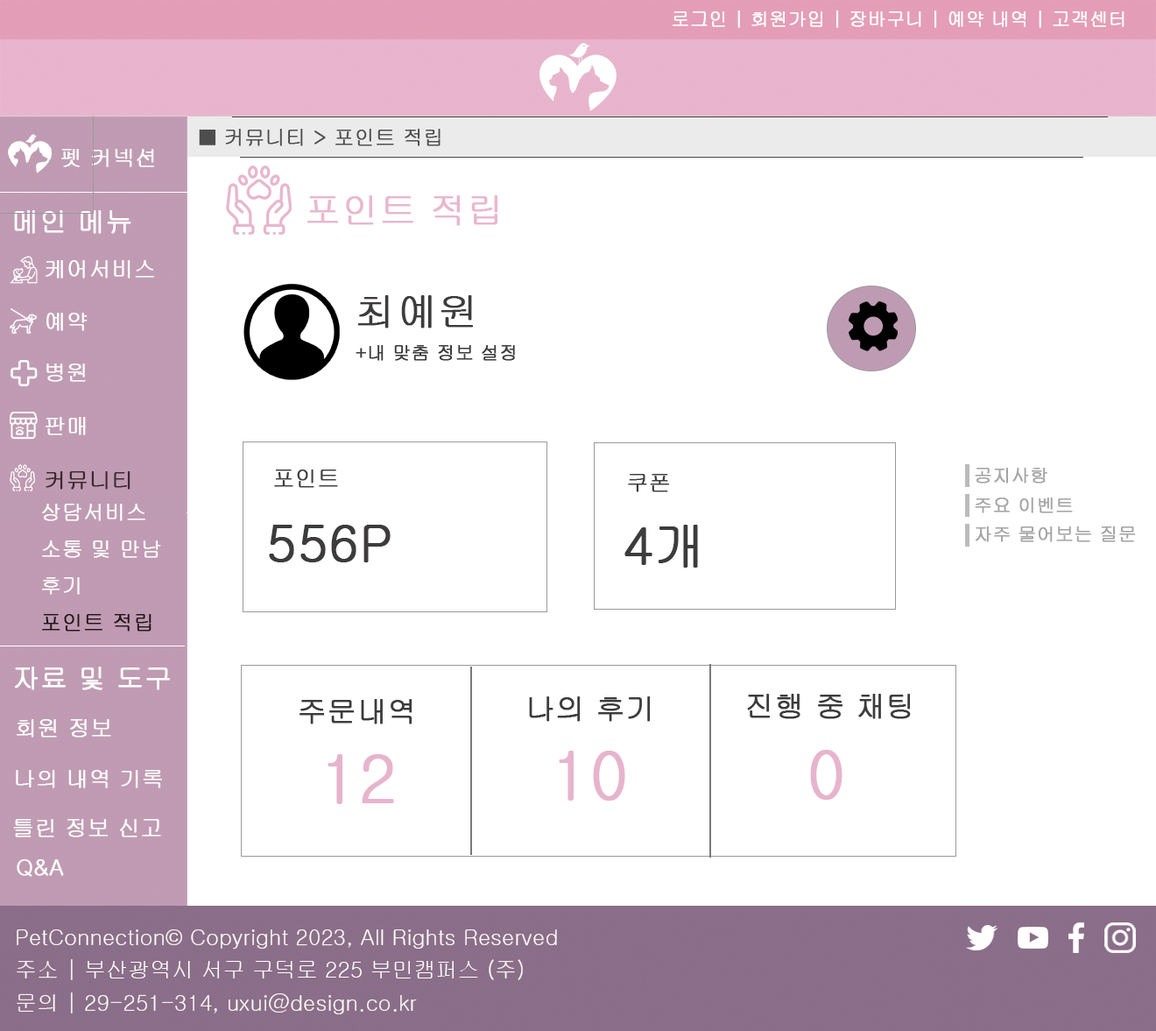
<style>
.page{position:relative;width:1156px;height:1031px;background:#ffffff}
.page>*{position:absolute;margin:0}
.t1{font:18.4px "Gulim";color:#ffffff;font-weight:bold}
.t2{font:20.1px "Gulim";color:#4d4d4d;font-weight:bold}
.t3{font:21.9px "Gulim";color:#ffffff;font-weight:bold}
.t4{font:36.5px "Gulim";color:#e9b7ce;font-weight:bold}
.t5{font:27.4px "Gulim";color:#ffffff;font-weight:bold}
.t6{font:40.2px "Gulim";color:#3d3b3b;font-weight:bold}
.t7{font:18.3px "Gulim";color:#3d3b3b;font-weight:bold}
.t8{font:21.9px "Gulim";color:#392a2e;font-weight:bold}
.t9{font:21.9px "Gulim";color:#3d3b3b;font-weight:bold}
.t10{font:18.3px "Gulim";color:#a5a5a5;font-weight:bold}
.t11{font:51.1px "Gulim";color:#3d3b3b;font-weight:bold}
.t12{font:29.2px "Gulim";color:#3d3b3b;font-weight:bold}
.t13{font:65.7px "Gulim";color:#e7b4cd;font-weight:bold}
.t14{font:21.9px/32.9px "Gulim";color:#ffffff}
</style>
<div class="page">
<p class="t1" style="left:673px;top:11px;width:452px;height:17px">로그인 | 회원가입 | 장바구니 | 예약 내역 | 고객센터</p>
<p class="t2" style="left:199px;top:129px;width:242px;height:17px">■ 커뮤니티 &gt; 포인트 적립</p>
<p class="t3" style="left:61px;top:149px;width:93px;height:18px">펫 커넥션</p>
<p class="t4" style="left:307px;top:195px;width:191px;height:31px">포인트 적립</p>
<p class="t5" style="left:14px;top:210px;width:117px;height:24px">메인 메뉴</p>
<p class="t3" style="left:46px;top:260px;width:108px;height:19px">케어서비스</p>
<p class="t6" style="left:357px;top:295px;width:116px;height:34px">최예원</p>
<p class="t3" style="left:46px;top:313px;width:42px;height:18px">예약</p>
<p class="t7" style="left:356px;top:345px;width:159px;height:16px">+내 맞춤 정보 설정</p>
<p class="t3" style="left:46px;top:364px;width:40px;height:18px">병원</p>
<p class="t3" style="left:46px;top:417px;width:40px;height:18px">판매</p>
<p class="t8" style="left:46px;top:471px;width:85px;height:19px">커뮤니티</p>
<p class="t9" style="left:274px;top:470px;width:64px;height:18px">포인트</p>
<p class="t9" style="left:628px;top:474px;width:41px;height:18px">쿠폰</p>
<p class="t10" style="left:975px;top:468px;width:73px;height:16px">공지사항</p>
<p class="t10" style="left:975px;top:498px;width:98px;height:15px">주요 이벤트</p>
<p class="t11" style="left:269px;top:525px;width:122px;height:37px">556P</p>
<p class="t11" style="left:625px;top:525px;width:73px;height:43px">4개</p>
<p class="t10" style="left:976px;top:527px;width:160px;height:15px">자주 물어보는 질문</p>
<p class="t5" style="left:15px;top:667px;width:155px;height:23px">자료 및 도구</p>
<p class="t12" style="left:300px;top:699px;width:113px;height:26px">주문내역</p>
<p class="t12" style="left:529px;top:696px;width:122px;height:26px">나의 후기</p>
<p class="t12" style="left:747px;top:694px;width:164px;height:25px">진행 중 채팅</p>
<p class="t3" style="left:17px;top:719px;width:94px;height:19px">회원 정보</p>
<p class="t13" style="left:810px;top:750px;width:33px;height:50px">0</p>
<p class="t13" style="left:328px;top:754px;width:66px;height:50px">12</p>
<p class="t13" style="left:559px;top:751px;width:67px;height:50px">10</p>
<p class="t3" style="left:16px;top:770px;width:146px;height:18px">나의 내역 기록</p>
<p class="t3" style="left:13px;top:819px;width:148px;height:19px">틀린 정보 신고</p>
<p class="t3" style="left:17px;top:859px;width:47px;height:18px">Q&amp;A</p>
<p class="t14" style="left:17px;top:930px;width:540px;height:84px">PetConnection© Copyright 2023, All Rights Reserved<br>주소 | 부산광역시 서구 구덕로 225 부민캠퍼스 (주)<br>문의 | 29-251-314, uxui@design.co.kr</p>
</div>
